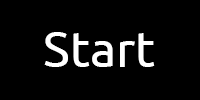
<style>
.page{position:relative;width:200px;height:100px;background:#000000}
.page>*{position:absolute;margin:0}
.t1{font:50px "Ubuntu";color:#ffffff}
</style>
<div class="page">
<p class="t1" style="left:44px;top:32px;width:111px;height:35px">Start</p>
</div>
